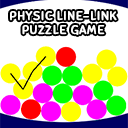
<style>
.page{position:relative;width:128px;height:128px;background:#ffffff}
.page>*{position:absolute;margin:0}
.t1{font:11.4px/14.4px "Sniglet-Regular";letter-spacing:0.06em;color:#ffffff;text-transform:uppercase;font-weight:bold;scale:1.05 1}
</style>
<div class="page">
<p class="t1" style="left:10px;top:11px;width:107px;height:24px;text-align:center">Physic line-link<br>puzzle game</p>
</div>
